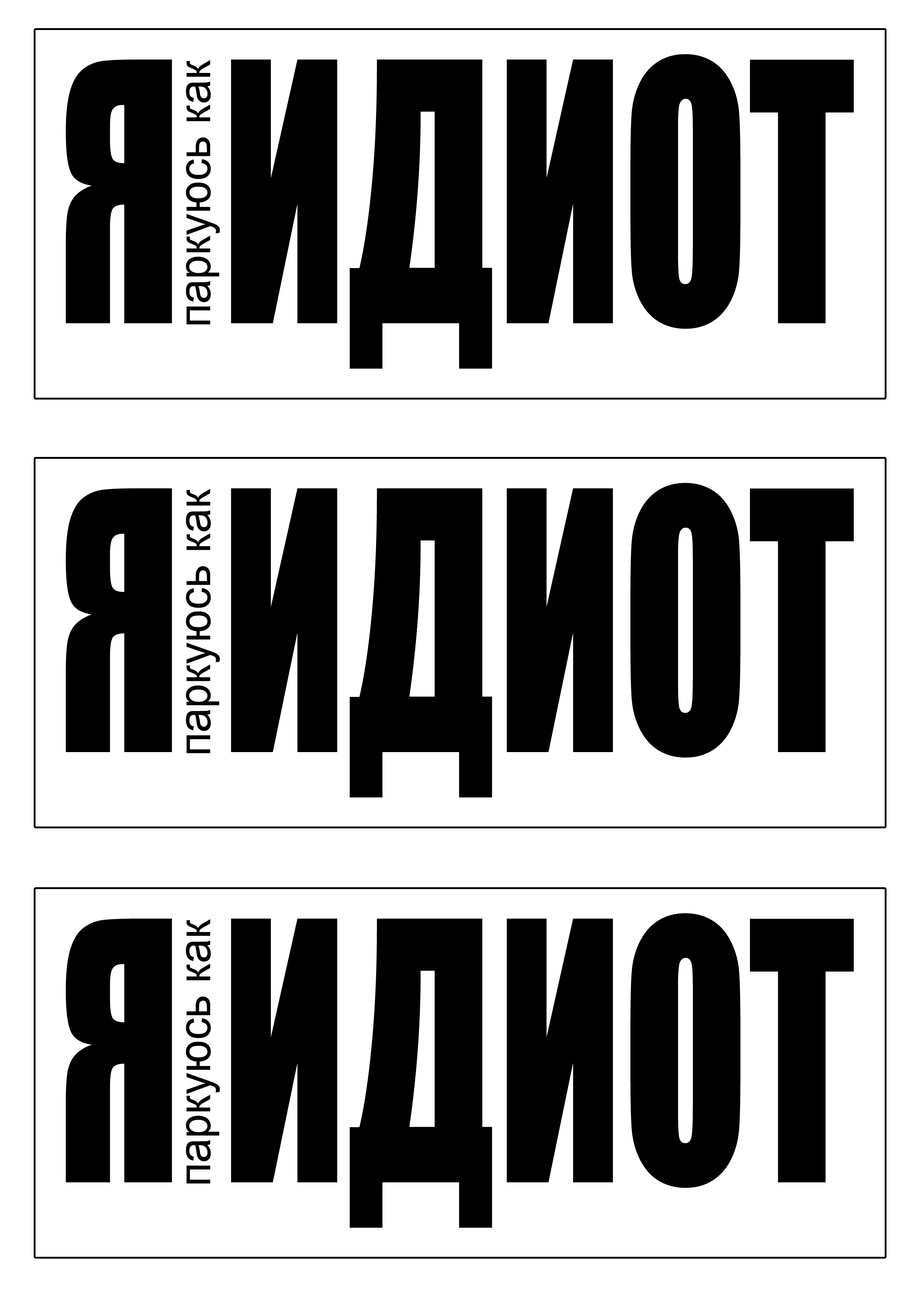
<style>
.page{position:relative;width:918px;height:1299px;background:#ffffff}
.page>*{position:absolute;margin:0}
.t1{font:333.2px "Impact";color:#000000;text-transform:uppercase;scale:0.69 1}
.t2{font:45.5px "ArialMT";color:#000000;scale:0.96 1}
</style>
<div class="page">
<p class="t1" style="left:66px;top:54px;width:788px;height:315px">Я Идиот</p>
<p class="t2" style="left:186px;top:60px;width:34px;height:264px;rotate:-90deg">паркуюсь как</p>
<p class="t1" style="left:66px;top:483px;width:788px;height:314px">Я Идиот</p>
<p class="t2" style="left:186px;top:489px;width:34px;height:264px;rotate:-90deg">паркуюсь как</p>
<p class="t1" style="left:66px;top:913px;width:788px;height:315px">Я Идиот</p>
<p class="t2" style="left:186px;top:919px;width:34px;height:264px;rotate:-90deg">паркуюсь как</p>
</div>
